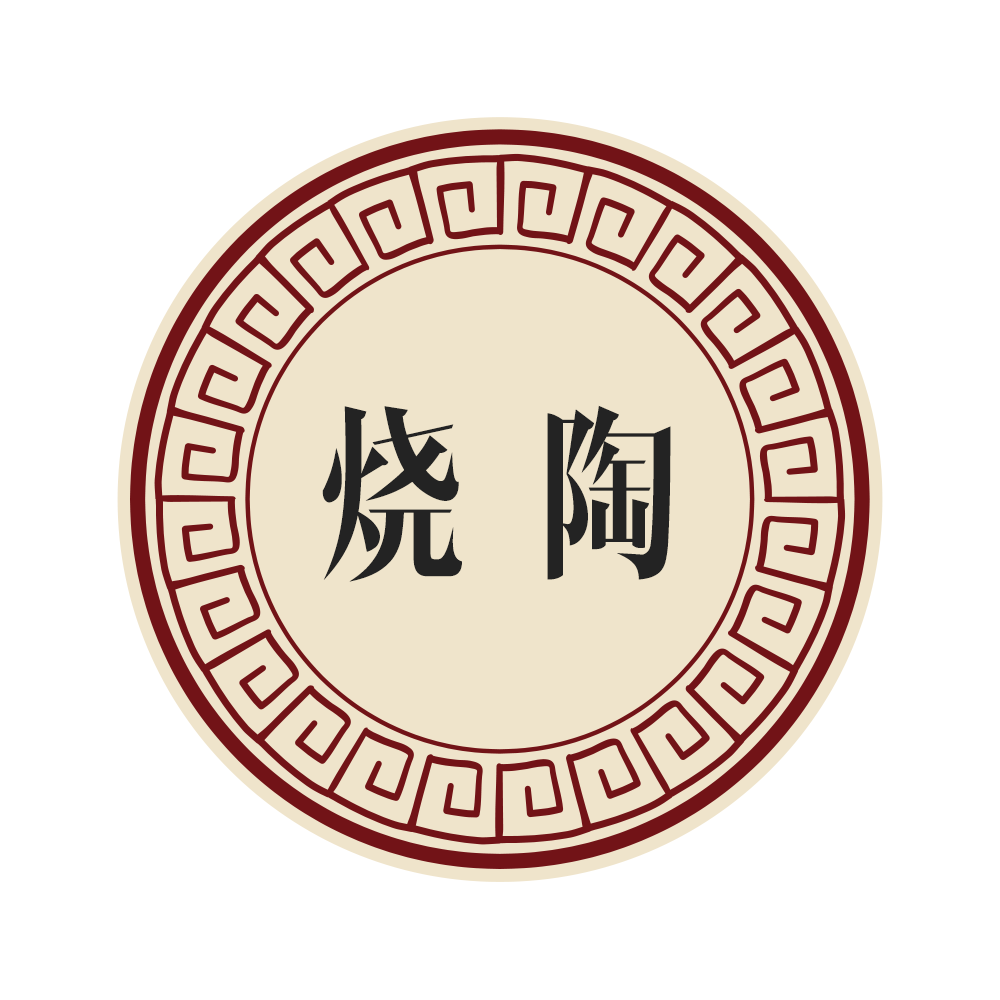
<style>
.page{position:relative;width:1000px;height:1000px;background:#ffffff}
.page>*{position:absolute;margin:0}
.t1{font:191.7px "RTWSJyunYaG0v1-Regular";letter-spacing:0.38em;color:#232323;text-transform:uppercase}
</style>
<div class="page">
<p class="t1" style="left:322px;top:405px;width:349px;height:177px">烧陶</p>
</div>
